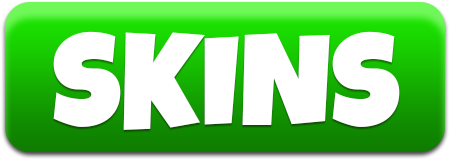
<style>
.page{position:relative;width:451px;height:161px;background:#ffffff}
.page>*{position:absolute;margin:0}
.t1{font:130px "LuckiestGuy-Regular";color:#ffffff;text-transform:uppercase}
</style>
<div class="page">
<p class="t1" style="left:53px;top:31px;width:347px;height:99px">Skins</p>
</div>
